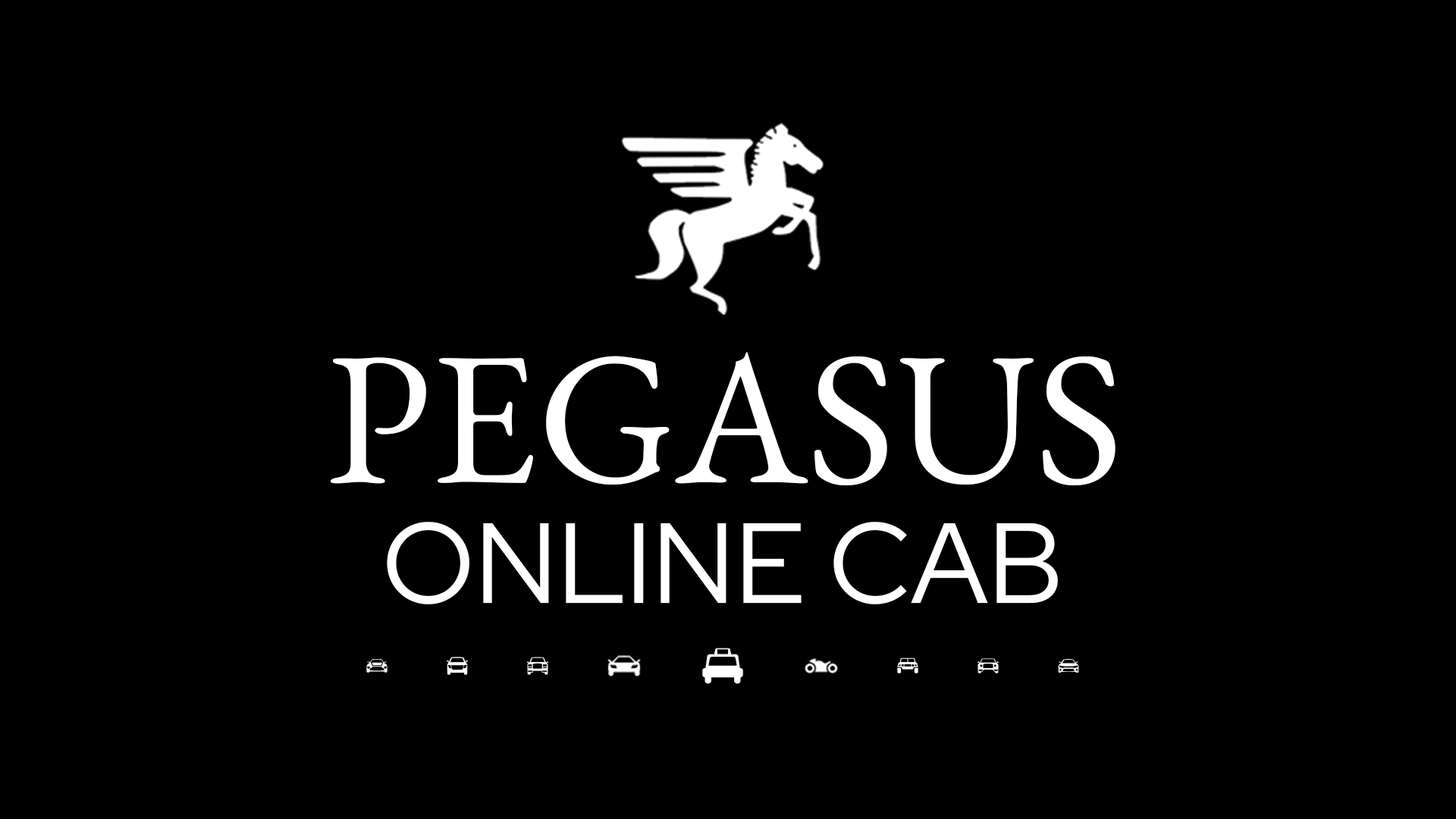
<style>
.page{position:relative;width:1456px;height:819px;background:#000000}
.page>*{position:absolute;margin:0}
.t1{font:189.6px "EBGaramond-Regular";color:#ffffff}
.t2{font:113.7px "RedHatDisplay-Regular";color:#ffffff}
</style>
<div class="page">
<p class="t1" style="left:331px;top:352px;width:784px;height:133px">PEGASUS</p>
<p class="t2" style="left:387px;top:522px;width:671px;height:82px">ONLINE CAB</p>
</div>
